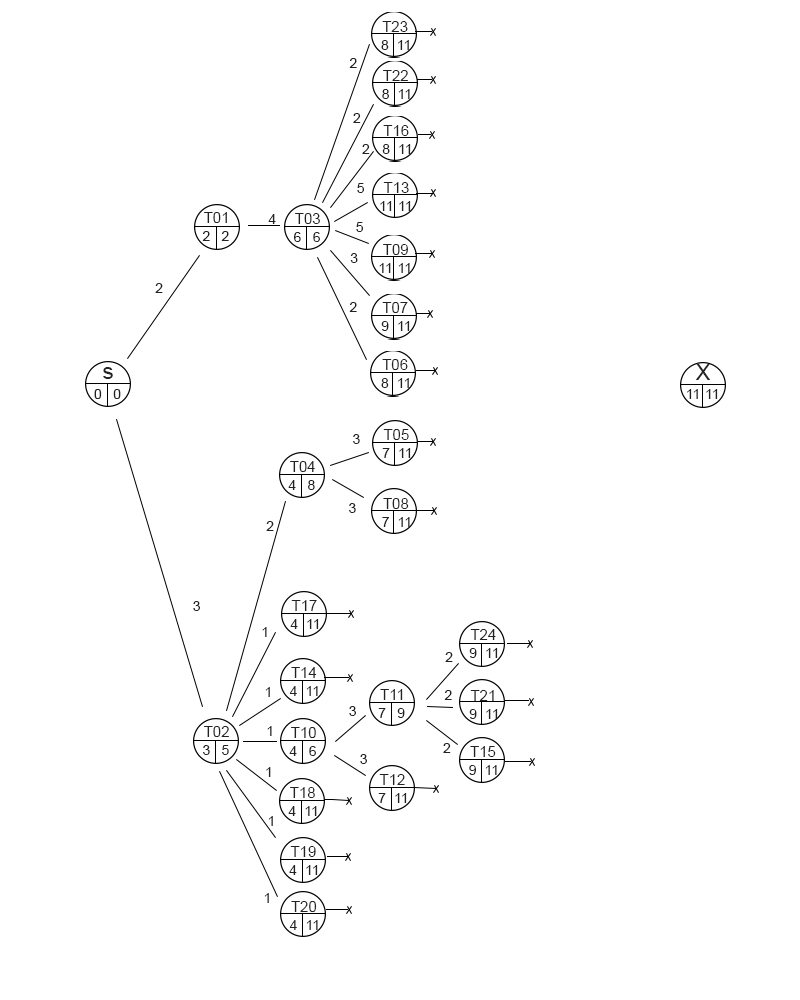
<style>
.page{position:relative;width:800px;height:1000px;background:#ffffff}
.page>*{position:absolute;margin:0}
.t1{font:15px "ArialMT";color:#202225}
.t2{font:14px "ArialMT";color:#202225}
.t3{font:22px "ArialMT";color:#202225}
</style>
<div class="page">
<p class="t1" style="left:382px;top:21px;width:26px;height:11px">T23</p>
<p class="t2" style="left:381px;top:40px;width:8px;height:10px">8</p>
<p class="t2" style="left:398px;top:40px;width:11px;height:10px">11</p>
<p class="t2" style="left:349px;top:58px;width:8px;height:10px">2</p>
<p class="t1" style="left:383px;top:70px;width:25px;height:11px">T22</p>
<p class="t2" style="left:382px;top:89px;width:7px;height:10px">8</p>
<p class="t2" style="left:398px;top:89px;width:12px;height:10px">11</p>
<p class="t2" style="left:353px;top:113px;width:8px;height:10px">2</p>
<p class="t1" style="left:383px;top:125px;width:26px;height:11px">T16</p>
<p class="t2" style="left:362px;top:144px;width:8px;height:10px">2</p>
<p class="t2" style="left:382px;top:144px;width:8px;height:10px">8</p>
<p class="t2" style="left:399px;top:144px;width:12px;height:10px">11</p>
<p class="t2" style="left:357px;top:183px;width:7px;height:10px">5</p>
<p class="t1" style="left:383px;top:182px;width:26px;height:11px">T13</p>
<p class="t2" style="left:380px;top:201px;width:12px;height:10px">11</p>
<p class="t2" style="left:399px;top:201px;width:12px;height:10px">11</p>
<p class="t1" style="left:204px;top:212px;width:23px;height:11px">T01</p>
<p class="t2" style="left:268px;top:214px;width:8px;height:10px">4</p>
<p class="t1" style="left:295px;top:213px;width:25px;height:11px">T03</p>
<p class="t2" style="left:356px;top:222px;width:7px;height:10px">5</p>
<p class="t2" style="left:202px;top:231px;width:8px;height:10px">2</p>
<p class="t2" style="left:221px;top:231px;width:8px;height:10px">2</p>
<p class="t2" style="left:294px;top:232px;width:7px;height:10px">6</p>
<p class="t2" style="left:313px;top:232px;width:7px;height:10px">6</p>
<p class="t1" style="left:383px;top:244px;width:25px;height:11px">T09</p>
<p class="t2" style="left:350px;top:253px;width:8px;height:10px">3</p>
<p class="t2" style="left:379px;top:263px;width:12px;height:10px">11</p>
<p class="t2" style="left:398px;top:263px;width:12px;height:10px">11</p>
<p class="t2" style="left:155px;top:283px;width:8px;height:10px">2</p>
<p class="t2" style="left:349px;top:302px;width:8px;height:10px">2</p>
<p class="t1" style="left:382px;top:302px;width:26px;height:11px">T07</p>
<p class="t2" style="left:381px;top:321px;width:8px;height:10px">9</p>
<p class="t2" style="left:398px;top:321px;width:12px;height:10px">11</p>
<p class="t1" style="left:382px;top:359px;width:26px;height:11px">T06</p>
<p class="t3" style="left:695px;top:364px;width:15px;height:16px">X</p>
<p class="t3" style="left:103px;top:367px;width:10px;height:12px">s</p>
<p class="t2" style="left:94px;top:389px;width:8px;height:10px">0</p>
<p class="t2" style="left:113px;top:389px;width:8px;height:10px">0</p>
<p class="t2" style="left:381px;top:378px;width:8px;height:10px">8</p>
<p class="t2" style="left:398px;top:378px;width:11px;height:10px">11</p>
<p class="t2" style="left:687px;top:389px;width:11px;height:10px">11</p>
<p class="t2" style="left:706px;top:389px;width:12px;height:10px">11</p>
<p class="t2" style="left:353px;top:434px;width:7px;height:10px">3</p>
<p class="t1" style="left:383px;top:429px;width:26px;height:11px">T05</p>
<p class="t2" style="left:382px;top:448px;width:8px;height:10px">7</p>
<p class="t2" style="left:399px;top:448px;width:12px;height:10px">11</p>
<p class="t1" style="left:290px;top:461px;width:25px;height:11px">T04</p>
<p class="t2" style="left:288px;top:480px;width:8px;height:10px">4</p>
<p class="t2" style="left:308px;top:480px;width:7px;height:10px">8</p>
<p class="t2" style="left:349px;top:503px;width:7px;height:10px">3</p>
<p class="t1" style="left:383px;top:498px;width:26px;height:11px">T08</p>
<p class="t2" style="left:266px;top:521px;width:8px;height:10px">2</p>
<p class="t2" style="left:382px;top:517px;width:7px;height:10px">7</p>
<p class="t2" style="left:398px;top:517px;width:12px;height:10px">11</p>
<p class="t2" style="left:193px;top:601px;width:7px;height:10px">3</p>
<p class="t1" style="left:291px;top:600px;width:26px;height:11px">T17</p>
<p class="t2" style="left:262px;top:627px;width:5px;height:10px">1</p>
<p class="t2" style="left:290px;top:619px;width:8px;height:10px">4</p>
<p class="t2" style="left:307px;top:619px;width:12px;height:10px">11</p>
<p class="t1" style="left:470px;top:629px;width:26px;height:11px">T24</p>
<p class="t2" style="left:445px;top:652px;width:8px;height:10px">2</p>
<p class="t2" style="left:469px;top:648px;width:8px;height:10px">9</p>
<p class="t2" style="left:486px;top:648px;width:12px;height:10px">11</p>
<p class="t1" style="left:291px;top:667px;width:26px;height:11px">T14</p>
<p class="t2" style="left:265px;top:687px;width:5px;height:10px">1</p>
<p class="t2" style="left:289px;top:686px;width:8px;height:10px">4</p>
<p class="t2" style="left:306px;top:686px;width:12px;height:10px">11</p>
<p class="t1" style="left:380px;top:689px;width:23px;height:11px">T11</p>
<p class="t2" style="left:444px;top:690px;width:8px;height:10px">2</p>
<p class="t1" style="left:470px;top:690px;width:24px;height:11px">T21</p>
<p class="t2" style="left:349px;top:706px;width:7px;height:10px">3</p>
<p class="t2" style="left:378px;top:708px;width:8px;height:10px">7</p>
<p class="t2" style="left:397px;top:708px;width:8px;height:10px">9</p>
<p class="t2" style="left:469px;top:709px;width:8px;height:10px">9</p>
<p class="t2" style="left:486px;top:709px;width:12px;height:10px">11</p>
<p class="t1" style="left:204px;top:726px;width:25px;height:11px">T02</p>
<p class="t2" style="left:267px;top:726px;width:5px;height:10px">1</p>
<p class="t1" style="left:291px;top:727px;width:25px;height:11px">T10</p>
<p class="t2" style="left:203px;top:745px;width:7px;height:10px">3</p>
<p class="t2" style="left:222px;top:745px;width:7px;height:10px">5</p>
<p class="t2" style="left:289px;top:746px;width:8px;height:10px">4</p>
<p class="t2" style="left:309px;top:746px;width:7px;height:10px">6</p>
<p class="t2" style="left:443px;top:743px;width:8px;height:10px">2</p>
<p class="t1" style="left:470px;top:746px;width:26px;height:11px">T15</p>
<p class="t2" style="left:360px;top:754px;width:7px;height:10px">3</p>
<p class="t2" style="left:266px;top:767px;width:5px;height:10px">1</p>
<p class="t1" style="left:379px;top:774px;width:26px;height:11px">T12</p>
<p class="t2" style="left:469px;top:765px;width:7px;height:10px">9</p>
<p class="t2" style="left:485px;top:765px;width:12px;height:10px">11</p>
<p class="t1" style="left:290px;top:787px;width:25px;height:11px">T18</p>
<p class="t2" style="left:378px;top:793px;width:8px;height:10px">7</p>
<p class="t2" style="left:395px;top:793px;width:12px;height:10px">11</p>
<p class="t2" style="left:288px;top:806px;width:8px;height:10px">4</p>
<p class="t2" style="left:305px;top:806px;width:12px;height:10px">11</p>
<p class="t2" style="left:268px;top:816px;width:5px;height:10px">1</p>
<p class="t1" style="left:290px;top:846px;width:26px;height:11px">T19</p>
<p class="t2" style="left:289px;top:865px;width:8px;height:10px">4</p>
<p class="t2" style="left:306px;top:865px;width:12px;height:10px">11</p>
<p class="t2" style="left:264px;top:893px;width:5px;height:10px">1</p>
<p class="t1" style="left:291px;top:901px;width:26px;height:11px">T20</p>
<p class="t2" style="left:289px;top:920px;width:8px;height:10px">4</p>
<p class="t2" style="left:306px;top:920px;width:12px;height:10px">11</p>
</div>
